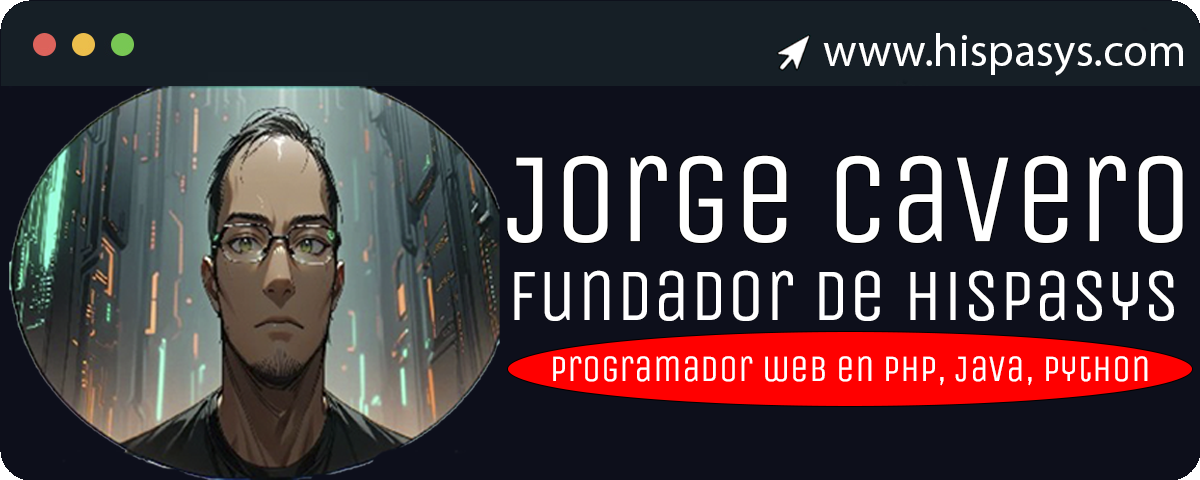
<style>
.page{position:relative;width:1200px;height:480px;background:#0d0f1b}
.page>*{position:absolute;margin:0}
.t1{font:45.9px "MyriadPro-Regular";color:#ffffff}
.t2{font:127.9px "UnicaOne-Regular";color:#ffffff}
.t3{font:74.1px "UnicaOne-Regular";color:#ffffff}
.t4{font:37.3px "UnicaOne-Regular";color:#ffffff}
</style>
<div class="page">
<p class="t1" style="left:823px;top:33px;width:360px;height:43px">www.hispasys.com</p>
<p class="t2" style="left:507px;top:155px;width:676px;height:88px">Jorge Cavero</p>
<p class="t3" style="left:514px;top:270px;width:660px;height:51px">Fundador de HispaSys</p>
<p class="t4" style="left:553px;top:356px;width:595px;height:30px">Programador web en PHP, Java, Python</p>
</div>
